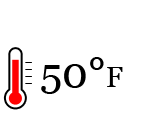
<style>
.page{position:relative;width:150px;height:125px;background:#ffffff}
.page>*{position:absolute;margin:0}
.t1{font:42.3px "Georgia";color:#000000}
.t2{font:28.3px "Georgia";color:#000000}
</style>
<div class="page">
<p class="t1" style="left:41px;top:57px;width:82px;height:37px">50°<span class="t2">F</span></p>
</div>
